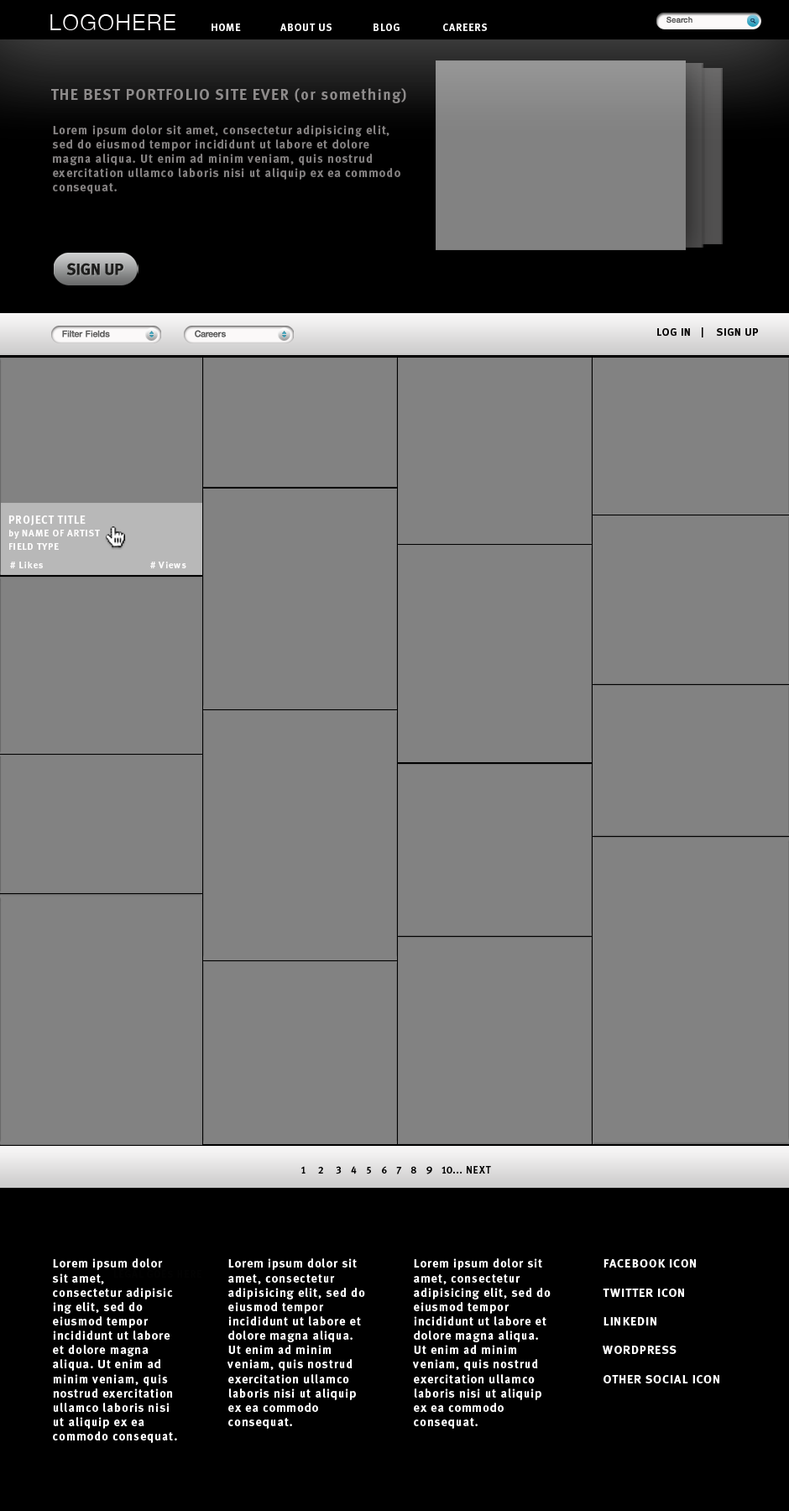
<style>
.page{position:relative;width:789px;height:1511px;background:#828282}
.page>*{position:absolute;margin:0}
.t1{font:22.1px "HelveticaNeue-Light";letter-spacing:0.075em;color:#fdfbfb}
.t2{font:7.9px "HelveticaNeue-Medium";color:#585858}
.t3{font:10.6px "MetaBold-Roman";letter-spacing:0.075em;color:#fdfdfd}
.t4{font:15.4px "MetaBold-Roman";letter-spacing:0.075em;color:#838080}
.t5{font:12px "MetaBold-Roman";letter-spacing:0.075em;color:#838080}
.t6{font:16px "MetaBold-Roman";color:#1e1e1d;text-transform:uppercase}
.t7{font:8.9px "HelveticaNeue-Medium";color:#5b5b5b}
.t8{font:8.9px "HelveticaNeue-Medium";color:#5c5c5c}
.t9{font:10.6px "MetaBold-Roman";letter-spacing:0.075em;color:#020000}
.t10{font:11px "MetaBold-Roman";letter-spacing:0.075em;color:#fdfcfc}
.t11{font:9.6px "MetaBold-Roman";letter-spacing:0.075em;color:#fdfcfc}
.t12{font:10.1px "MetaMediumHuertaRoman";letter-spacing:0.075em;color:#030303}
.t13{font:12px "MetaBold-Roman";letter-spacing:0.075em;color:#ffffff}
</style>
<div class="page">
<p class="t1" style="left:50px;top:14px;width:125px;height:16px">LOGOHERE</p>
<p class="t2" style="left:667px;top:17px;width:26px;height:7px">Search</p>
<p class="t3" style="left:212px;top:24px;width:275px;height:7px">HOME  ABOUT US  BLOG   CAREERS</p>
<p class="t4" style="left:51px;top:88px;width:355px;height:15px">THE BEST PORTFOLIO SITE EVER (or something)</p>
<p class="t5" style="left:52px;top:125px;width:348px;height:69px">Lorem ipsum dolor sit amet, consectetur adipisicing elit, sed do eiusmod tempor incididunt ut labore et dolore magna aliqua. Ut enim ad minim veniam, quis nostrud exercitation ullamco laboris nisi ut aliquip ex ea commodo consequat.</p>
<p class="t6" style="left:66px;top:263px;width:57px;height:12px">sign UP</p>
<p class="t7" style="left:62px;top:330px;width:48px;height:7px">Filter Fields</p>
<p class="t8" style="left:195px;top:330px;width:31px;height:7px">Careers</p>
<p class="t9" style="left:657px;top:327px;width:101px;height:10px">LOG IN   |    SIGN UP</p>
<p class="t10" style="left:8px;top:515px;width:78px;height:11px">PROJECT TITLE</p>
<p class="t11" style="left:8px;top:530px;width:92px;height:9px">by NAME OF ARTIST</p>
<p class="t11" style="left:9px;top:543px;width:50px;height:7px">FIELD TYPE</p>
<p class="t11" style="left:10px;top:562px;width:33px;height:6px"># Likes</p>
<p class="t11" style="left:150px;top:562px;width:36px;height:6px"># Views</p>
<p class="t12" style="left:301px;top:1166px;width:190px;height:8px">1    2    3   4   5   6   7   8   9   10... NEXT</p>
<p class="t13" style="left:52px;top:1258px;width:125px;height:185px">Lorem ipsum dolor sit amet, consectetur adipisic<br>ing elit, sed do eiusmod tempor incididunt ut labore et dolore magna aliqua. Ut enim ad minim veniam, quis nostrud exercitation ullamco laboris nisi ut aliquip ex ea commodo consequat.</p>
<p class="t13" style="left:227px;top:1258px;width:138px;height:171px">Lorem ipsum dolor sit amet, consectetur adipisicing elit, sed do eiusmod tempor incididunt ut labore et dolore magna aliqua. Ut enim ad minim veniam, quis nostrud exercitation ullamco laboris nisi ut aliquip ex ea commodo consequat.</p>
<p class="t13" style="left:412px;top:1258px;width:139px;height:171px">Lorem ipsum dolor sit amet, consectetur adipisicing elit, sed do eiusmod tempor incididunt ut labore et dolore magna aliqua. Ut enim ad minim veniam, quis nostrud exercitation ullamco laboris nisi ut aliquip ex ea commodo consequat.</p>
<p class="t13" style="left:603px;top:1259px;width:116px;height:124px">FACEBOOK ICON<br><br>TWITTER ICON<br><br>LINKEDIN<br><br>WORDPRESS<br><br>OTHER SOCIAL ICON</p>
</div>
